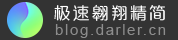
<style>
.page{position:relative;width:178px;height:40px;background:#333333}
.page>*{position:absolute;margin:0}
.t1{font:17.3px "FZPSHJW--GB1-0";letter-spacing:0.1em;color:#ffffff}
.t2{font:15.2px "ArialMT";letter-spacing:0.1em;color:#8d8d8d}
</style>
<div class="page">
<p class="t1" style="left:54px;top:4px;width:111px;height:17px">极速翱翔精简</p>
<p class="t2" style="left:55px;top:24px;width:111px;height:14px">blog.darler.cn</p>
</div>
